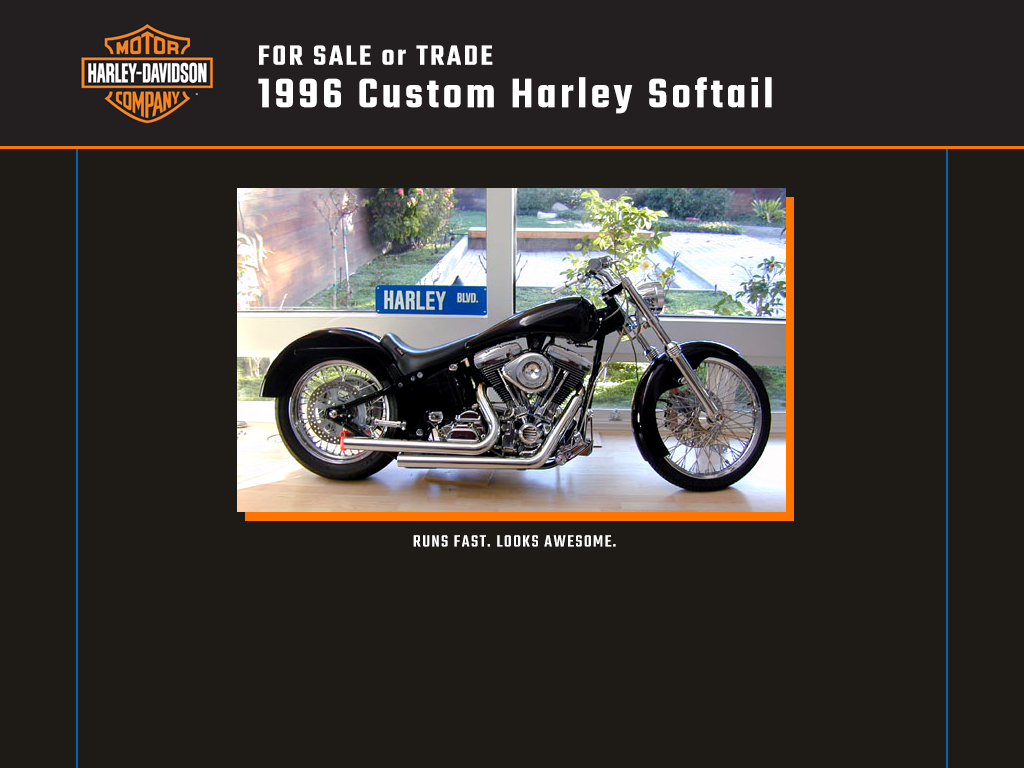
<style>
.page{position:relative;width:1024px;height:768px;background:#1e1b17}
.page>*{position:absolute;margin:0}
.t1{font:45px/42.5px "Teko-Semibold";letter-spacing:0.08em;color:#ffffff}
.t2{font:30px/42.5px "Teko-Semibold";letter-spacing:0.08em;color:#ffffff}
.t3{font:18px "Teko-Medium";letter-spacing:0.08em;color:#ffffff}
</style>
<div class="page">
<p class="t1" style="left:258px;top:45px;width:514px;height:69px"><span class="t2">FOR SALE or TRADE<br></span>1996 Custom Harley Softail</p>
<p class="t3" style="left:413px;top:535px;width:203px;height:12px">RUNS FAST. LOOKS AWESOME.</p>
</div>
